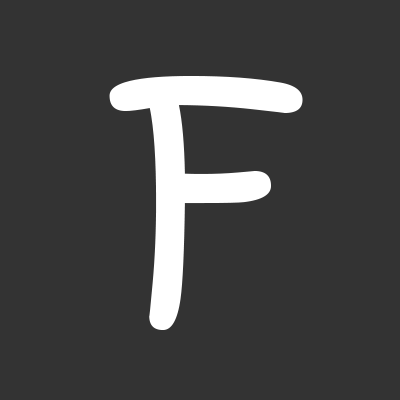
<style>
.page{position:relative;width:400px;height:400px;background:#333333}
.page>*{position:absolute;margin:0}
.t1{font:300px "KristenITC-Regular";color:#ffffff}
</style>
<div class="page">
<p class="t1" style="left:109px;top:75px;width:194px;height:255px">F</p>
</div>
